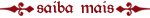
<style>
.page{position:relative;width:150px;height:18px;background:#ffffff}
.page>*{position:absolute;margin:0}
.t1{font:14.7px "Kelmscott-Regular";color:#8e0a12}
</style>
<div class="page">
<p class="t1" style="left:37px;top:1px;width:77px;height:13px">saiba mais</p>
</div>
